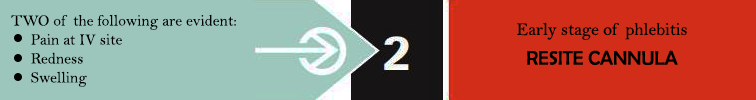
<style>
.page{position:relative;width:756px;height:100px;background:#d22d19}
.page>*{position:absolute;margin:0}
.t1{font:15.8px "BellMT";color:#010101}
</style>
<div class="page">
<p class="t1" style="left:11px;top:14px;width:225px;height:73px">TWO of the following are evident:<br>     Pain at IV site<br>     Redness<br>     Swelling</p>
</div>
